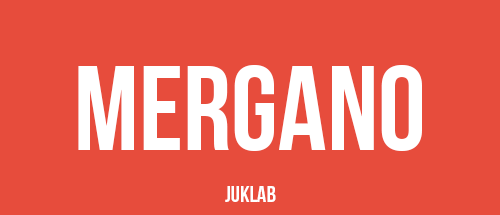
<style>
.page{position:relative;width:500px;height:215px;background:#e74c3c}
.page>*{position:absolute;margin:0}
.t1{font:120px "BebasNeue";color:#ffffff}
.t2{font:23.1px "BebasNeue";color:#ffffff}
</style>
<div class="page">
<p class="t1" style="left:78px;top:65px;width:344px;height:86px">Mergano</p>
<p class="t2" style="left:225px;top:186px;width:51px;height:16px">juklab</p>
</div>
